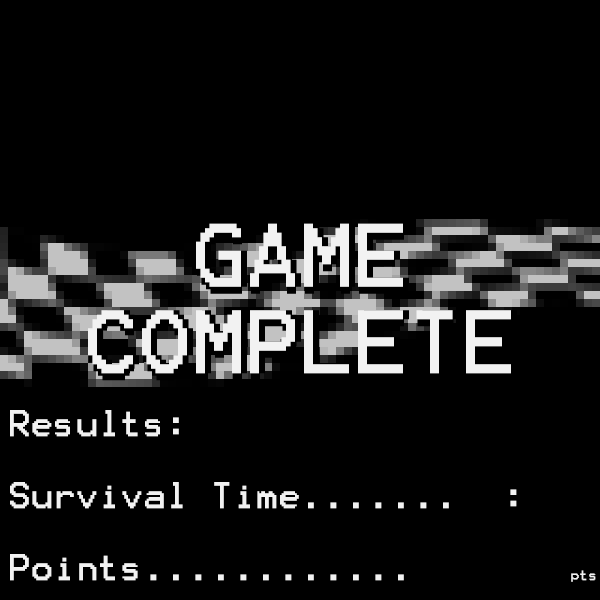
<style>
.page{position:relative;width:600px;height:600px;background:#000000}
.page>*{position:absolute;margin:0}
.t1{font:72px "Terminal";color:#f2f2f2}
.t2{font:29px "Terminal";color:#f2f2f2}
.t3{font:30px "Terminal";color:#f2f2f2}
.t4{font:12px "Terminal";color:#f2f2f2}
</style>
<div class="page">
<p class="t1" style="left:88px;top:223px;width:423px;height:151px;text-align:center"><span class="t2"><br><br><br><br><br><br></span>GAME<br>COMPLETE</p>
<p class="t3" style="left:10px;top:410px;width:586px;height:172px">Results:<br><br>Survival Time.......  :  <br><br>Points............       <span class="t4">pts</span></p>
</div>
